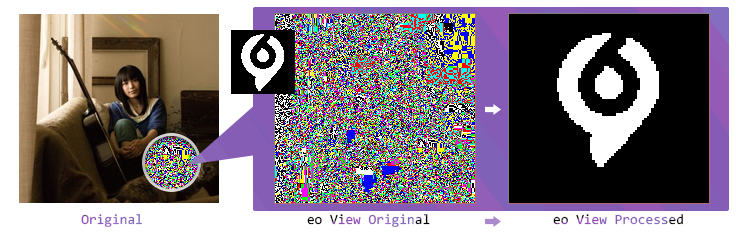
<style>
.page{position:relative;width:736px;height:243px;background:#ffffff}
.page>*{position:absolute;margin:0}
.t1{font:14px "YaHei-Consolas-Hybrid"}
</style>
<div class="page">
<p class="t1" style="left:81px;top:214px;width:61px;height:13px">Original</p>
<p class="t1" style="left:307px;top:214px;width:123px;height:13px">eo View Original</p>
<p class="t1" style="left:553px;top:214px;width:130px;height:11px">eo View Processed</p>
</div>
